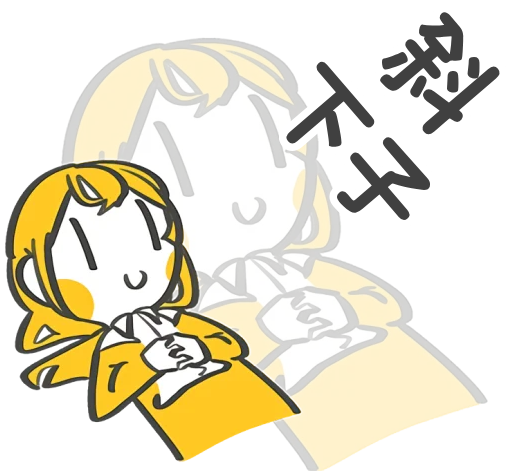
<style>
.page{position:relative;width:512px;height:474px;background:#ffffff}
.page>*{position:absolute;margin:0}
.t1{font:92px "ShangguRoundTC-Bold"}
.t2{font:104px "ShangguRoundTC-Bold"}
</style>
<div class="page">
<p class="t1" style="left:276px;top:2px;width:234px;height:229px;text-align:center;rotate:49deg"><span class="t2">斜<br></span>下子</p>
</div>
